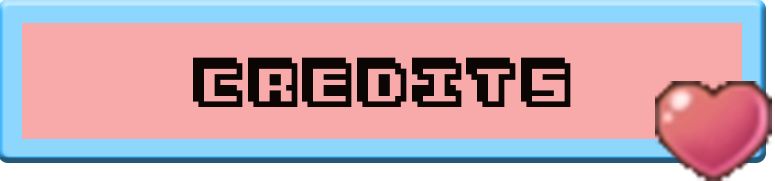
<style>
.page{position:relative;width:775px;height:181px;background:#f8a9a9}
.page>*{position:absolute;margin:0}
.t1{font:87.5px "3Dventure";color:#130a06}
</style>
<div class="page">
<p class="t1" style="left:193px;top:57px;width:378px;height:50px">Credits</p>
</div>
